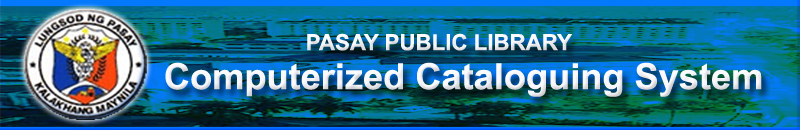
<style>
.page{position:relative;width:800px;height:130px}
.page>*{position:absolute;margin:0}
.t1{font:22.2px "Arial-BoldMT";color:#f9f9fd}
.t2{font:36.1px "Arial-BoldMT";color:#f9f9fd}
</style>
<div class="page">
<p class="t1" style="left:307px;top:33px;width:265px;height:18px">PASAY PUBLIC LIBRARY</p>
<p class="t2" style="left:165px;top:62px;width:597px;height:35px">Computerized Cataloguing System</p>
</div>
